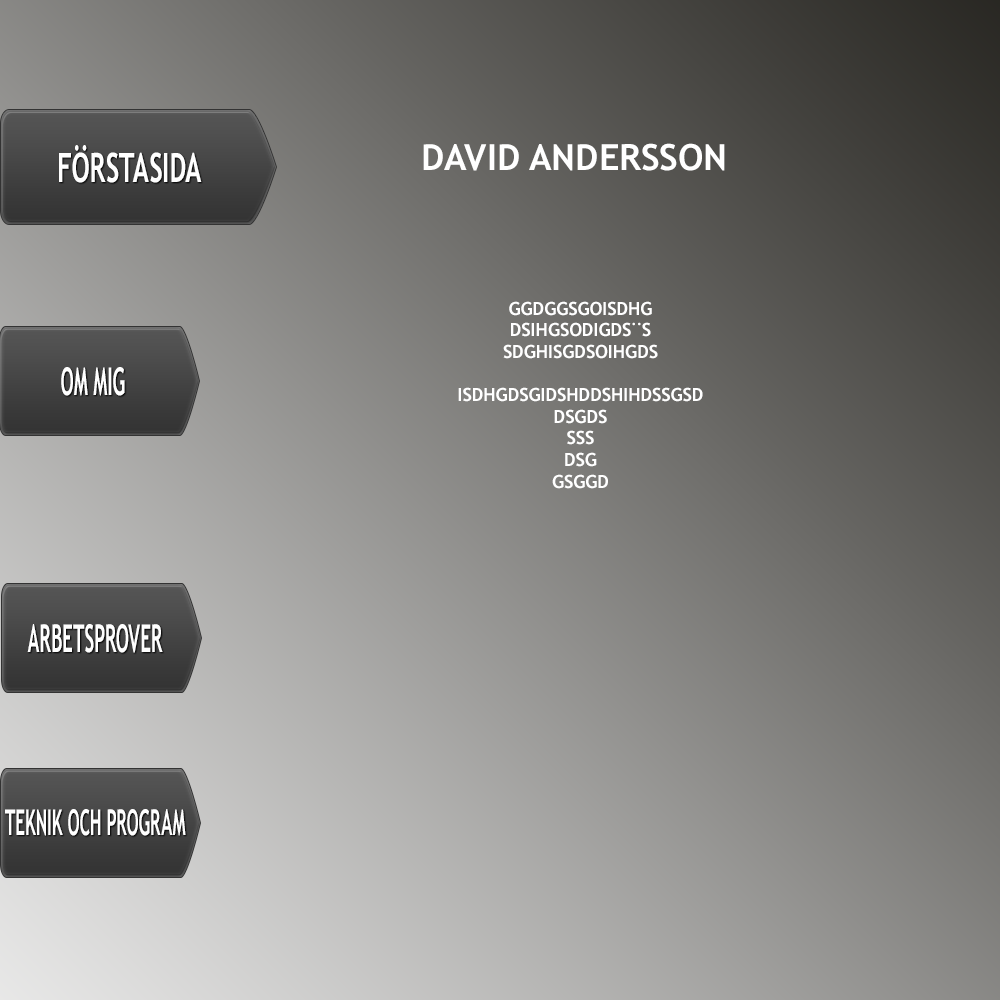
<style>
.page{position:relative;width:1000px;height:1000px}
.page>*{position:absolute;margin:0}
.t1{font:40.6px "TrebuchetMS-Bold";color:#ffffff;text-transform:uppercase;scale:0.64 1}
.t2{font:36px "TrebuchetMS-Bold";color:#ffffff;text-transform:uppercase}
.t3{font:18px "TrebuchetMS-Bold";color:#ffffff;text-transform:uppercase}
.t4{font:38.5px "TrebuchetMS-Bold";color:#ffffff;text-transform:uppercase;scale:0.49 1}
.t5{font:35.7px "TrebuchetMS-Bold";color:#ffffff;text-transform:uppercase;scale:0.48 1}
</style>
<div class="page">
<p class="t1" style="left:59px;top:145px;width:143px;height:38px">Förstasida</p>
<p class="t2" style="left:423px;top:143px;width:302px;height:28px">dAVID ANDERSSON</p>
<p class="t3" style="left:458px;top:301px;width:245px;height:188px;text-align:center">GGDGGSGOISDHG<br>DSIHGSODIGDS¨S<br>SDGHISGDSOIHGDS<br><br>ISDHGDSGIDSHDDSHIHDSSGSD<br>DSGDS<br>SSS<br>DSG<br>GSGGD</p>
<p class="t4" style="left:61px;top:367px;width:64px;height:29px">Om mig</p>
<p class="t4" style="left:27px;top:624px;width:136px;height:29px">ARBETSPROVER</p>
<p class="t5" style="left:5px;top:809px;width:181px;height:27px">Teknik och program</p>
</div>
